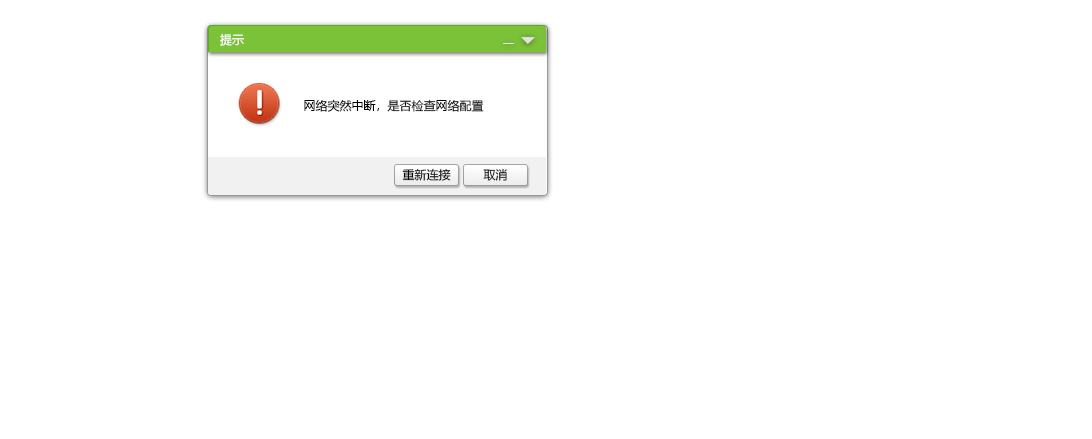
<style>
.page{position:relative;width:1092px;height:439px;background:#ffffff}
.page>*{position:absolute;margin:0}
.t1{font:12px "MicrosoftYaHei";color:#ffffff}
.t2{font:12px "MicrosoftYaHei";color:#000000}
.t3{font:12px "MicrosoftYaHei"}
</style>
<div class="page">
<p class="t1" style="left:220px;top:33px;width:24px;height:13px">提示</p>
<p class="t2" style="left:304px;top:99px;width:180px;height:13px">网络突然中断，是否检查网络配置</p>
<p class="t2" style="left:402px;top:168px;width:49px;height:13px">重新连接</p>
<p class="t3" style="left:483px;top:168px;width:24px;height:13px">取消</p>
</div>
